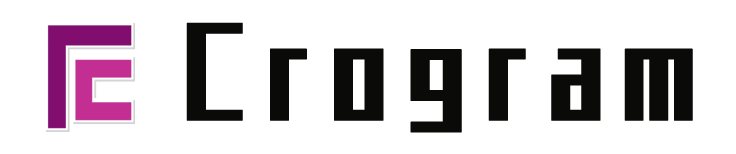
<style>
.page{position:relative;width:736px;height:154px;background:#ffffff}
.page>*{position:absolute;margin:0}
.t1{font:131.1px "RuixianTopHeiHeavyGB1.0";letter-spacing:0.103em;color:#0a0a09;font-weight:bold;scale:0.72 1}
</style>
<div class="page">
<p class="t1" style="left:186px;top:22px;width:507px;height:111px">Crogram</p>
</div>
